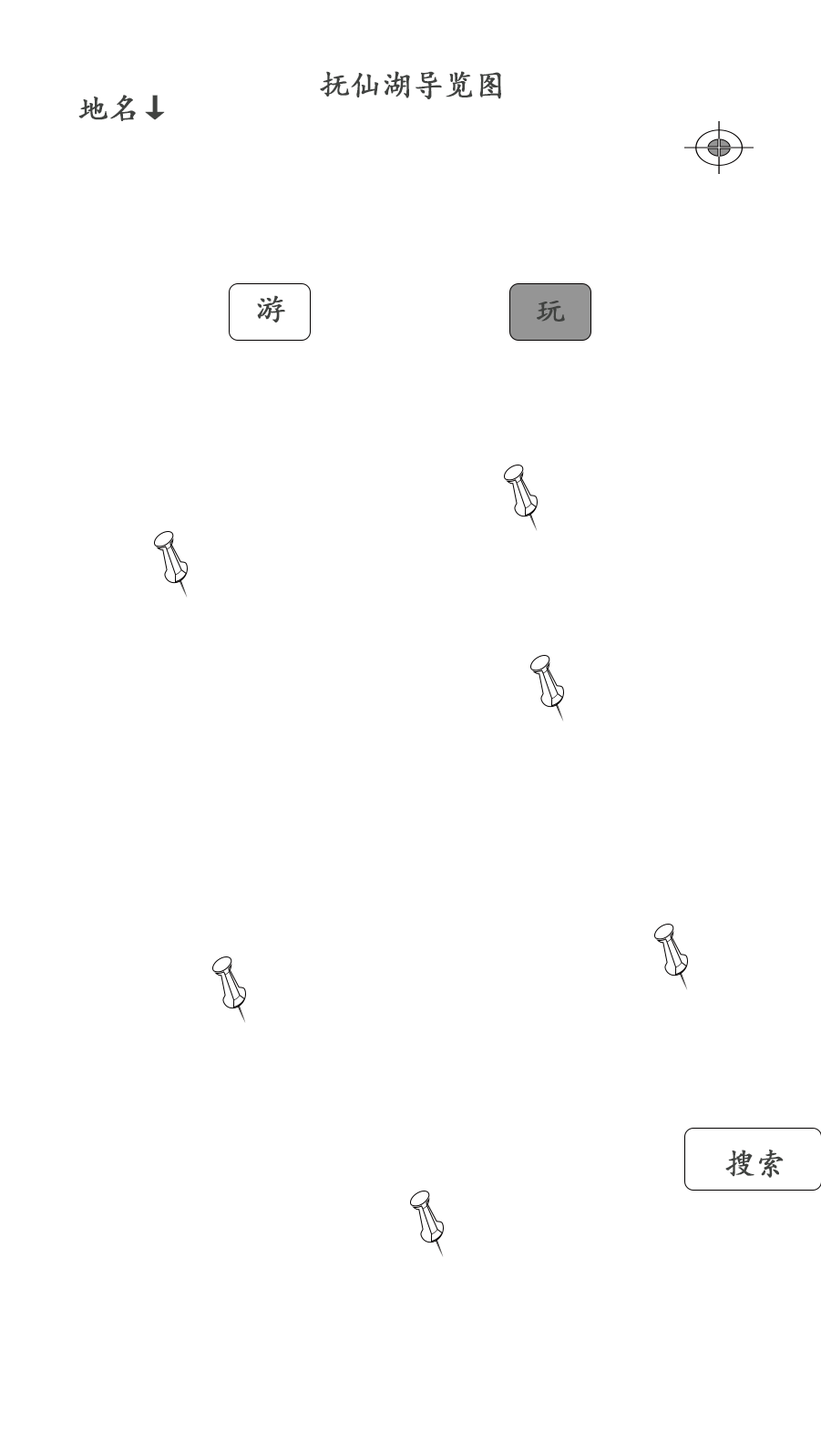
<style>
.page{position:relative;width:821px;height:1452px;background:#ffffff}
.page>*{position:absolute;margin:0}
.t1{font:30.4px "KaiTi";color:#404240;font-weight:bold}
</style>
<div class="page">
<p class="t1" style="left:320px;top:71px;width:181px;height:28px">抚仙湖导览图</p>
<p class="t1" style="left:78px;top:95px;width:87px;height:26px">地名↓</p>
<p class="t1" style="left:257px;top:295px;width:28px;height:28px">游</p>
<p class="t1" style="left:537px;top:301px;width:28px;height:21px">玩</p>
<p class="t1" style="left:725px;top:1150px;width:59px;height:28px">搜索</p>
</div>
